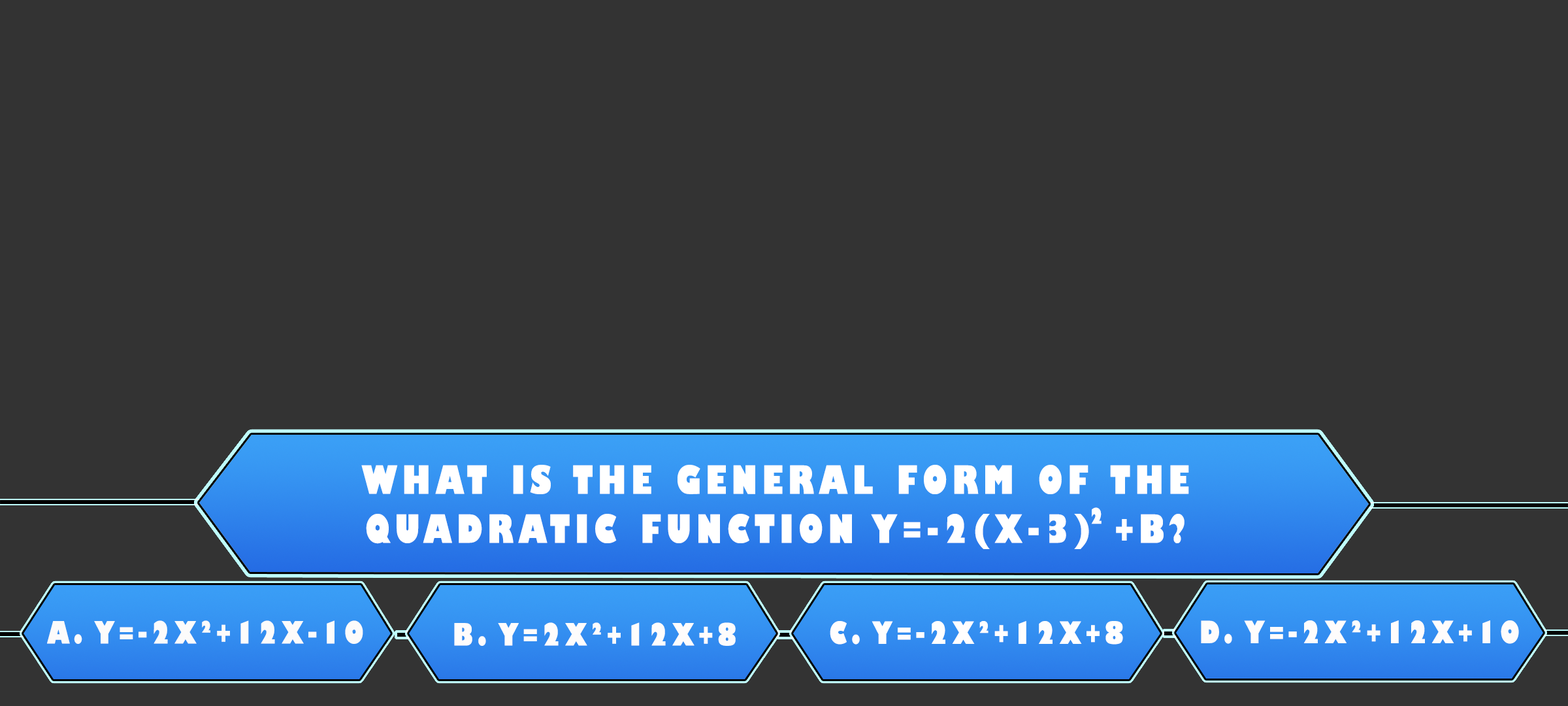
<style>
.page{position:relative;width:1568px;height:706px;background:#333333}
.page>*{position:absolute;margin:0}
.t1{font:38.1px/49px "GillSans-UltraBoldCondensed";letter-spacing:0.115em;color:#ffffff;text-transform:uppercase;scale:1.12 1}
.t2{font:21.1px "GillSans-UltraBoldCondensed";letter-spacing:0.115em;color:#ffffff;text-transform:uppercase;scale:1.11 1}
.t3{font:29.9px "GillSans-UltraBoldCondensed";letter-spacing:0.115em;color:#fcfbfb;text-transform:uppercase;scale:1.12 1}
.t4{font:29.9px "GillSans-UltraBoldCondensed";letter-spacing:0.115em;color:#fefcfc;text-transform:uppercase;scale:1.12 1}
.t5{font:29.9px "GillSans-UltraBoldCondensed";letter-spacing:0.115em;color:#fffefe;text-transform:uppercase;scale:1.12 1}
</style>
<div class="page">
<p class="t1" style="left:361px;top:465px;width:828px;height:84px;text-align:center">What is the general form of the<br>quadratic function y=-2(x-3) +b?</p>
<p class="t2" style="left:1091px;top:507px;width:11px;height:17px">2</p>
<p class="t3" style="left:47px;top:620px;width:316px;height:24px">a. y=-2x²+12x-10</p>
<p class="t4" style="left:454px;top:622px;width:282px;height:23px">b. y=2x²+12x+8</p>
<p class="t5" style="left:830px;top:621px;width:293px;height:23px">c. y=-2x²+12x+8</p>
<p class="t4" style="left:1201px;top:620px;width:318px;height:24px">d. y=-2x²+12x+10</p>
</div>
